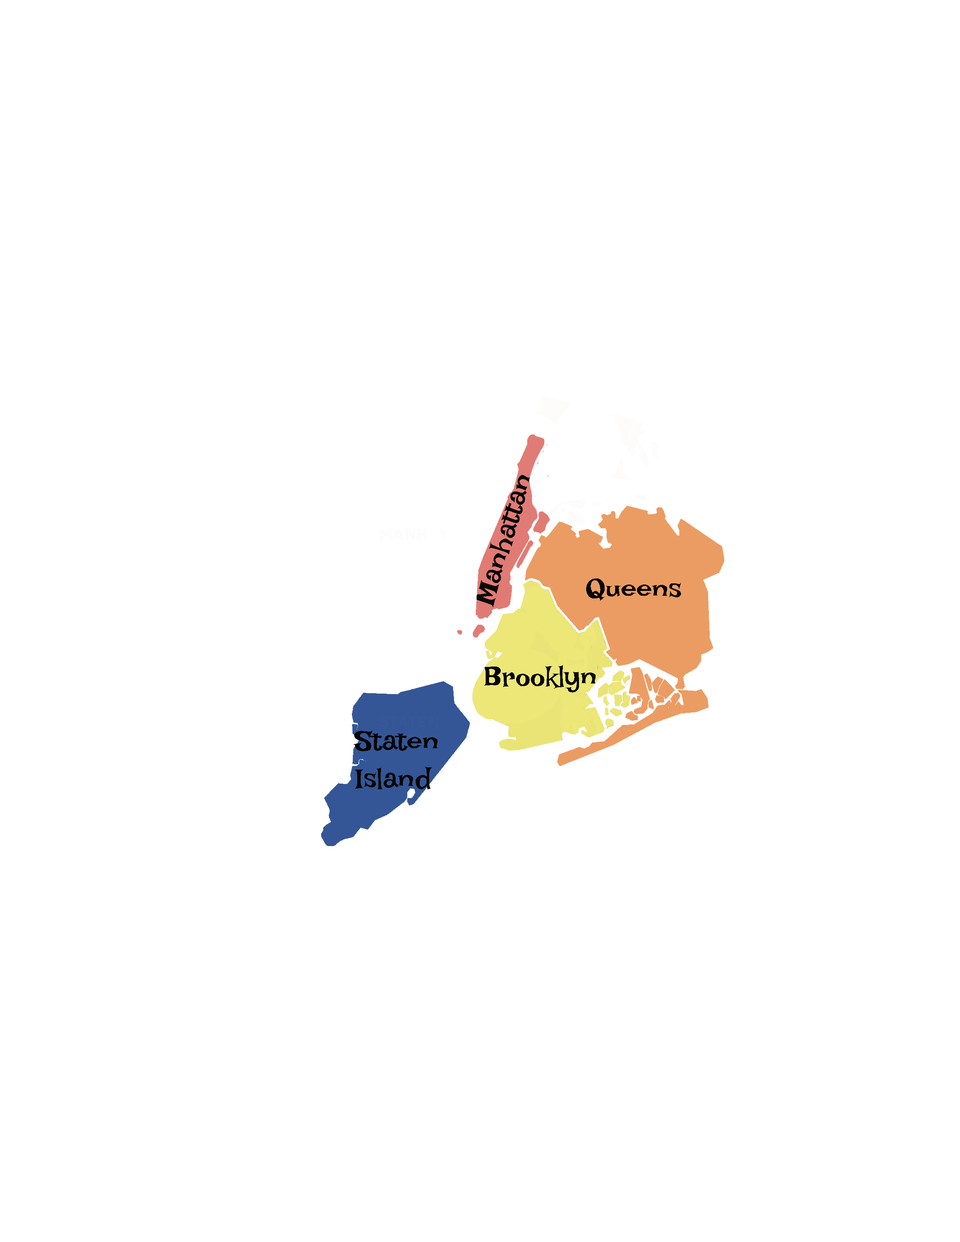
<style>
.page{position:relative;width:960px;height:1242px;background:#ffffff}
.page>*{position:absolute;margin:0}
.t1{font:28.2px "LakkiReddy";color:#060606}
.t2{font:28.2px/37.6px "LakkiReddy";color:#060606}
</style>
<div class="page">
<p class="t1" style="left:474px;top:475px;width:56px;height:133px;rotate:-73deg">Manhattan</p>
<p class="t1" style="left:586px;top:579px;width:95px;height:22px">Queens</p>
<p class="t1" style="left:483px;top:665px;width:113px;height:28px">Brooklyn</p>
<p class="t2" style="left:353px;top:731px;width:85px;height:59px">Staten <br>Island</p>
</div>
